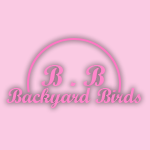
<style>
.page{position:relative;width:150px;height:150px;background:#facae3}
.page>*{position:absolute;margin:0}
.t1{font:29px "ScriptMTBold";color:#ff85ca}
.t2{font:20.7px "ScriptMTBold";color:#ff85ca}
</style>
<div class="page">
<p class="t1" style="left:41px;top:65px;width:64px;height:21px">B . B</p>
<p class="t2" style="left:6px;top:88px;width:135px;height:20px">Backyard Birds</p>
</div>
